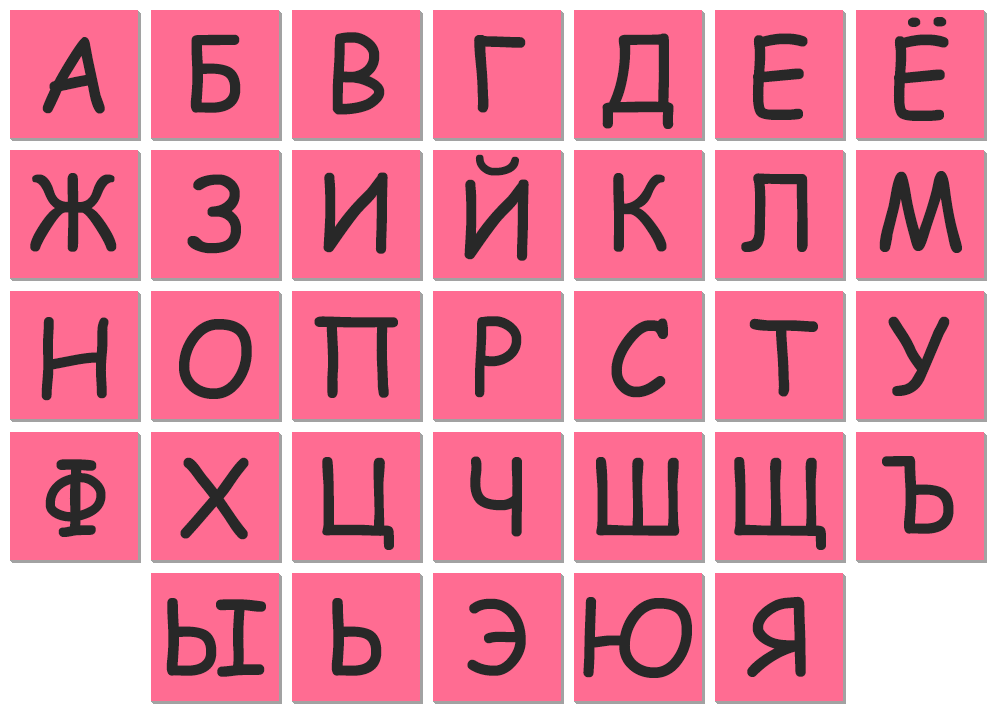
<style>
.page{position:relative;width:1002px;height:717px;background:#ff6c92}
.page>*{position:absolute;margin:0}
.t1{font:104px "ComicSansMS";color:#282828}
</style>
<div class="page">
<p class="t1" style="left:893px;top:17px;width:56px;height:104px">Ё</p>
<p class="t1" style="left:42px;top:37px;width:63px;height:77px">А</p>
<p class="t1" style="left:190px;top:34px;width:51px;height:79px">Б</p>
<p class="t1" style="left:332px;top:32px;width:53px;height:83px">В</p>
<p class="t1" style="left:474px;top:35px;width:52px;height:78px">Г</p>
<p class="t1" style="left:602px;top:33px;width:72px;height:96px">Д</p>
<p class="t1" style="left:752px;top:33px;width:56px;height:87px">Е</p>
<p class="t1" style="left:464px;top:154px;width:65px;height:107px">Й</p>
<p class="t1" style="left:30px;top:173px;width:87px;height:79px">Ж</p>
<p class="t1" style="left:187px;top:174px;width:54px;height:80px">З</p>
<p class="t1" style="left:323px;top:172px;width:65px;height:82px">И</p>
<p class="t1" style="left:613px;top:173px;width:54px;height:79px">К</p>
<p class="t1" style="left:741px;top:173px;width:67px;height:79px">Л</p>
<p class="t1" style="left:879px;top:171px;width:83px;height:82px">М</p>
<p class="t1" style="left:41px;top:317px;width:68px;height:84px">Н</p>
<p class="t1" style="left:314px;top:316px;width:84px;height:82px">П</p>
<p class="t1" style="left:474px;top:316px;width:48px;height:82px">Р</p>
<p class="t1" style="left:611px;top:318px;width:57px;height:80px">С</p>
<p class="t1" style="left:749px;top:318px;width:69px;height:79px">Т</p>
<p class="t1" style="left:888px;top:316px;width:62px;height:80px">У</p>
<p class="t1" style="left:179px;top:319px;width:73px;height:80px">О</p>
<p class="t1" style="left:45px;top:459px;width:61px;height:78px">Ф</p>
<p class="t1" style="left:180px;top:457px;width:69px;height:83px">Х</p>
<p class="t1" style="left:322px;top:457px;width:72px;height:93px">Ц</p>
<p class="t1" style="left:470px;top:456px;width:52px;height:81px">Ч</p>
<p class="t1" style="left:596px;top:457px;width:84px;height:79px">Ш</p>
<p class="t1" style="left:734px;top:457px;width:92px;height:93px">Щ</p>
<p class="t1" style="left:882px;top:456px;width:72px;height:78px">Ъ</p>
<p class="t1" style="left:166px;top:598px;width:100px;height:79px">Ы</p>
<p class="t1" style="left:331px;top:598px;width:51px;height:78px">Ь</p>
<p class="t1" style="left:467px;top:598px;width:59px;height:78px">Э</p>
<p class="t1" style="left:583px;top:597px;width:109px;height:81px">Ю</p>
<p class="t1" style="left:747px;top:596px;width:59px;height:81px">Я</p>
</div>
